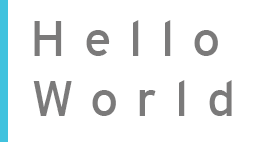
<style>
.page{position:relative;width:255px;height:142px;background:#ffffff}
.page>*{position:absolute;margin:0}
.t1{font:50px "EYInterstate-Regular";letter-spacing:0.36em;color:#7b7a7a}
</style>
<div class="page">
<p class="t1" style="left:34px;top:20px;width:184px;height:36px">Hello</p>
<p class="t1" style="left:33px;top:80px;width:199px;height:36px">World</p>
</div>
